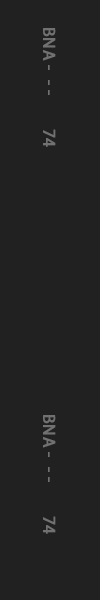
<style>
.page{position:relative;width:100px;height:600px;background:#212121}
.page>*{position:absolute;margin:0}
.t1{font:17.3px "MyriadPro-Regular";color:#717171;text-transform:uppercase;font-weight:bold}
</style>
<div class="page">
<p class="t1" style="left:43px;top:28px;width:13px;height:119px;rotate:90deg">bna -  - -        74</p>
<p class="t1" style="left:43px;top:415px;width:13px;height:119px;rotate:90deg">bna -  - -        74</p>
</div>
